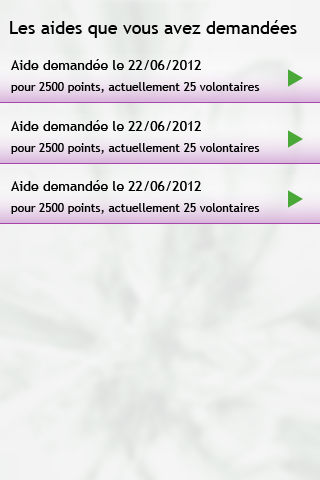
<style>
.page{position:relative;width:320px;height:480px}
.page>*{position:absolute;margin:0}
.t1{font:18px "TrebuchetMS";color:#000000}
.t2{font:14px "TrebuchetMS";color:#000000}
.t3{font:12px "TrebuchetMS";color:#000000}
</style>
<div class="page">
<p class="t1" style="left:10px;top:20px;width:287px;height:18px">Les aides que vous avez demandées</p>
<p class="t2" style="left:11px;top:59px;width:190px;height:11px">Aide demandée le 22/06/2012</p>
<p class="t3" style="left:11px;top:82px;width:249px;height:11px">pour 2500 points, actuellement 25 volontaires</p>
<p class="t2" style="left:11px;top:120px;width:190px;height:11px">Aide demandée le 22/06/2012</p>
<p class="t3" style="left:11px;top:143px;width:249px;height:11px">pour 2500 points, actuellement 25 volontaires</p>
<p class="t2" style="left:11px;top:180px;width:190px;height:11px">Aide demandée le 22/06/2012</p>
<p class="t3" style="left:11px;top:203px;width:249px;height:11px">pour 2500 points, actuellement 25 volontaires</p>
</div>
